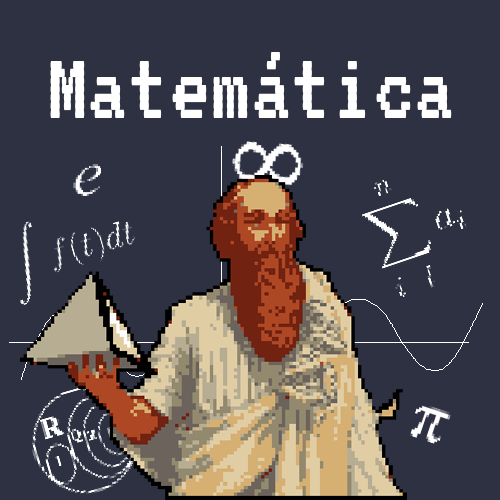
<style>
.page{position:relative;width:500px;height:500px;background:#2d3142}
.page>*{position:absolute;margin:0}
.t1{font:102px "VT323-Regular";color:#ffffff}
</style>
<div class="page">
<p class="t1" style="left:50px;top:52px;width:402px;height:66px">Matemática</p>
</div>
